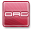
<style>
.page{position:relative;width:33px;height:30px}
.page>*{position:absolute;margin:0}
.t1{font:8px "911Porscha"}
</style>
<div class="page">
<p class="t1" style="left:5px;top:12px;width:23px;height:5px">Org</p>
</div>
